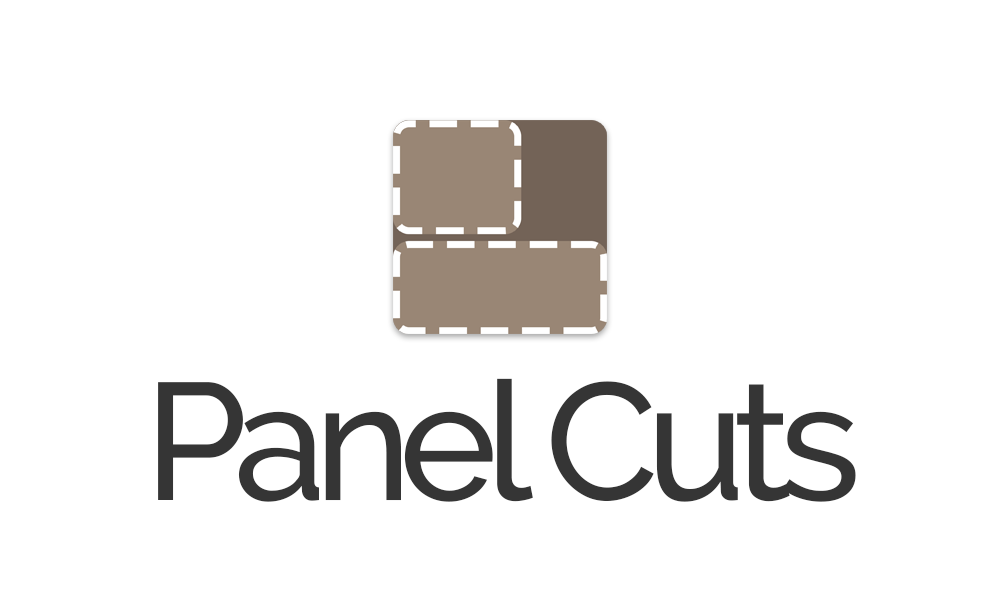
<style>
.page{position:relative;width:1000px;height:607px;background:#ffffff}
.page>*{position:absolute;margin:0}
.t1{font:166.2px "Raleway-Medium";letter-spacing:-0.075em;color:#353535}
</style>
<div class="page">
<p class="t1" style="left:158px;top:378px;width:698px;height:124px">Panel Cuts</p>
</div>
